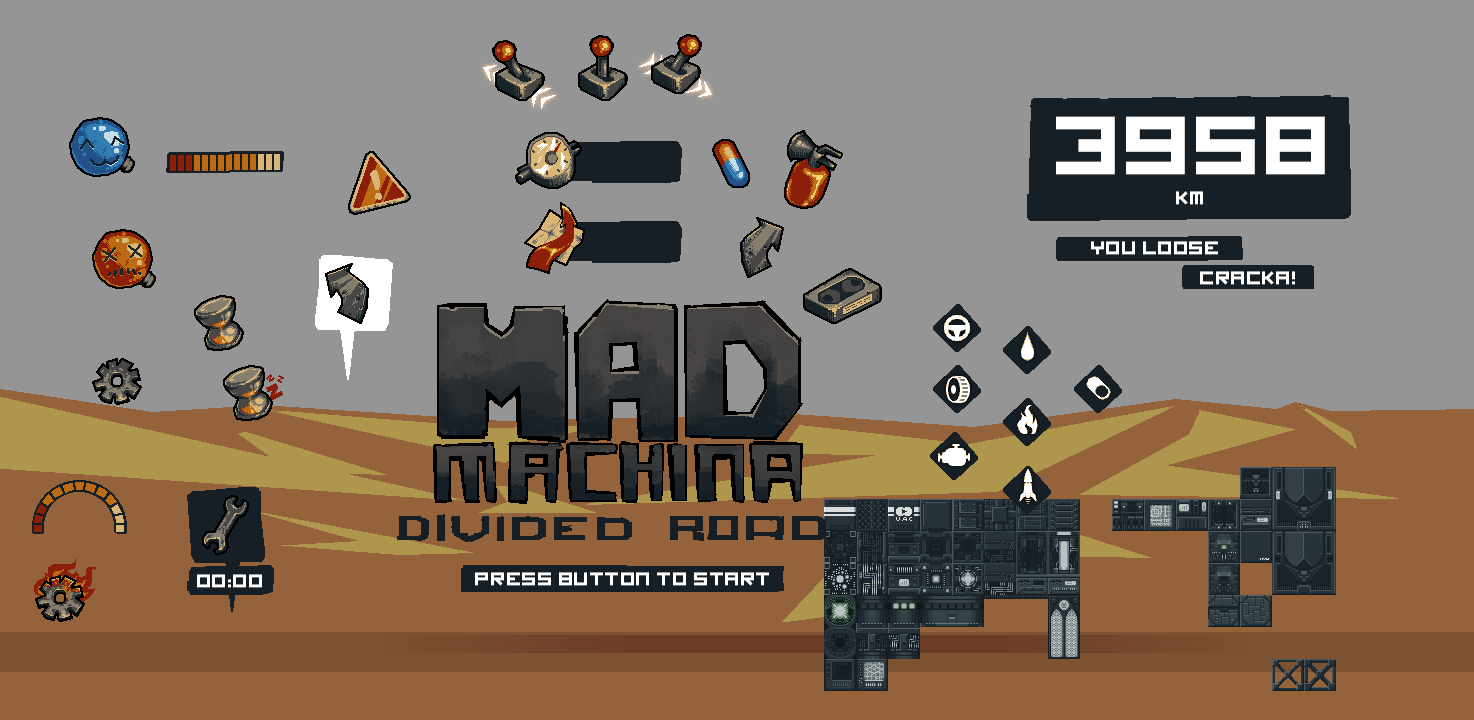
<style>
.page{position:relative;width:1474px;height:720px;background:#959595}
.page>*{position:absolute;margin:0}
.t1{font:90px "imagine-font";color:#ffffff;text-transform:uppercase;font-weight:bold}
.t2{font:20px "imagine-font";color:#ffffff;text-transform:uppercase;font-weight:bold}
</style>
<div class="page">
<p class="t1" style="left:1056px;top:116px;width:269px;height:59px">3958</p>
<p class="t2" style="left:1176px;top:191px;width:27px;height:14px">km</p>
<p class="t2" style="left:1091px;top:241px;width:127px;height:14px">you loose</p>
<p class="t2" style="left:1200px;top:271px;width:95px;height:14px">CRACKA!</p>
<p class="t2" style="left:197px;top:574px;width:65px;height:14px">00:00</p>
<p class="t2" style="left:475px;top:572px;width:294px;height:14px">press button to start</p>
</div>
